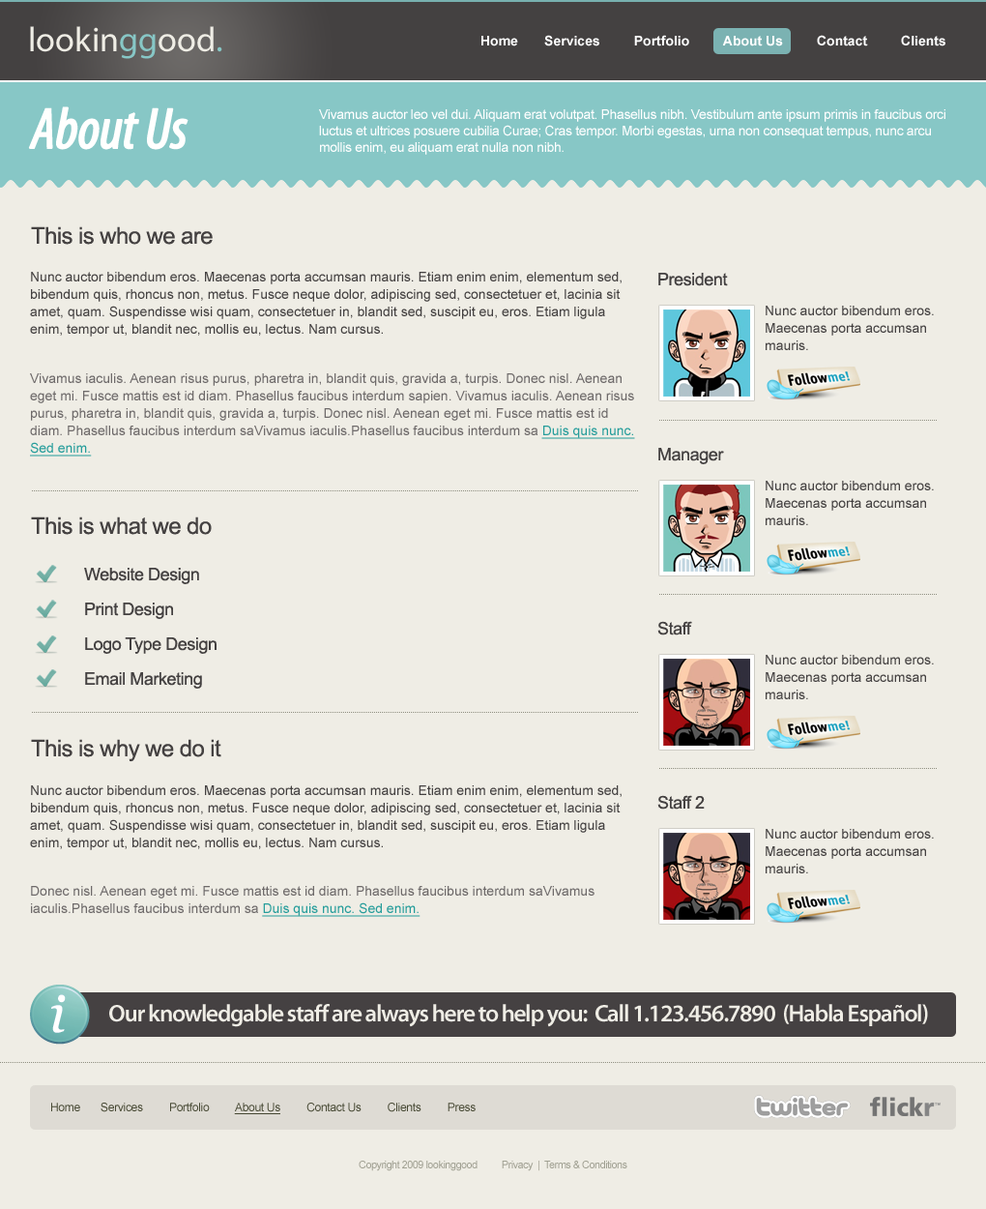
<style>
.page{position:relative;width:986px;height:1209px;background:#efede5}
.page>*{position:absolute;margin:0}
.t1{font:34.8px "MyriadPro-Regular";color:#efede5}
.t2{font:34.8px "MyriadPro-Regular";color:#87c7c6}
.t3{font:13.5px "Arial-BoldMT";color:#ffffff}
.t4{font:58px "MyriadPro-CondIt";letter-spacing:-0.025em;color:#fffffe;font-weight:bold}
.t5{font:13.5px "ArialMT";letter-spacing:-0.025em;color:#ffffff}
.t6{font:23.2px "ArialMT";letter-spacing:-0.025em;color:#444141}
.t7{font:13.5px/17.4px "ArialMT";color:#444141}
.t8{font:17.4px "ArialMT";letter-spacing:-0.025em;color:#444141}
.t9{font:13.5px/17.4px "ArialMT";color:#6e6a6a}
.t10{font:13.5px/17.4px "ArialMT";color:#269d9b;text-decoration:underline}
.t11{font:17.4px/34.8px "ArialMT";letter-spacing:-0.025em;color:#444141}
.t12{font:24.2px "MyriadPro-Semibold";letter-spacing:-0.05em;color:#efede5}
.t13{font:11.6px "ArialMT";letter-spacing:-0.025em;color:#464833}
.t14{font:11.6px "ArialMT";letter-spacing:-0.025em;color:#464833;text-decoration:underline}
.t15{font:10.6px "ArialMT";letter-spacing:-0.05em;color:#a1a193}
</style>
<div class="page">
<p class="t1" style="left:30px;top:26px;width:192px;height:33px">lookin<span class="t2">gg</span>ood<span class="t2">.</span></p>
<p class="t3" style="left:482px;top:35px;width:464px;height:11px">Home       Services         Portfolio         About Us         Contact         Clients</p>
<p class="t4" style="left:28px;top:106px;width:161px;height:44px">About Us</p>
<p class="t5" style="left:319px;top:109px;width:627px;height:46px">Vivamus auctor leo vel dui. Aliquam erat volutpat. Phasellus nibh. Vestibulum ante ipsum primis in faucibus orci luctus et ultrices posuere cubilia Curae; Cras tempor. Morbi egestas, urna non consequat tempus, nunc arcu mollis enim, eu aliquam erat nulla non nibh.</p>
<p class="t6" style="left:31px;top:226px;width:182px;height:19px">This is who we are</p>
<p class="t7" style="left:30px;top:272px;width:592px;height:65px">Nunc auctor bibendum eros. Maecenas porta accumsan mauris. Etiam enim enim, elementum sed, bibendum quis, rhoncus non, metus. Fusce neque dolor, adipiscing sed, consectetuer et, lacinia sit amet, quam. Suspendisse wisi quam, consectetuer in, blandit sed, suscipit eu, eros. Etiam ligula enim, tempor ut, blandit nec, mollis eu, lectus. Nam cursus.</p>
<p class="t8" style="left:659px;top:273px;width:69px;height:13px">President</p>
<p class="t7" style="left:766px;top:306px;width:168px;height:44px">Nunc auctor bibendum eros. Maecenas porta accumsan mauris.</p>
<p class="t9" style="left:30px;top:373px;width:605px;height:83px">Vivamus iaculis. Aenean risus purus, pharetra in, blandit quis, gravida a, turpis. Donec nisl. Aenean eget mi. Fusce mattis est id diam. Phasellus faucibus interdum sapien. Vivamus iaculis. Aenean risus purus, pharetra in, blandit quis, gravida a, turpis. Donec nisl. Aenean eget mi. Fusce mattis est id diam. Phasellus faucibus interdum saVivamus iaculis.Phasellus faucibus interdum sa <span class="t10">Duis quis nunc. Sed enim.</span></p>
<p class="t8" style="left:659px;top:448px;width:65px;height:16px">Manager</p>
<p class="t7" style="left:766px;top:481px;width:168px;height:44px">Nunc auctor bibendum eros. Maecenas porta accumsan mauris.</p>
<p class="t6" style="left:31px;top:516px;width:181px;height:19px">This is what we do</p>
<p class="t11" style="left:84px;top:568px;width:133px;height:121px">Website Design<br>Print Design<br>Logo Type Design<br>Email Marketing</p>
<p class="t8" style="left:658px;top:621px;width:34px;height:14px">Staff</p>
<p class="t7" style="left:766px;top:655px;width:168px;height:44px">Nunc auctor bibendum eros. Maecenas porta accumsan mauris.</p>
<p class="t6" style="left:31px;top:739px;width:190px;height:23px">This is why we do it</p>
<p class="t7" style="left:30px;top:785px;width:592px;height:65px">Nunc auctor bibendum eros. Maecenas porta accumsan mauris. Etiam enim enim, elementum sed, bibendum quis, rhoncus non, metus. Fusce neque dolor, adipiscing sed, consectetuer et, lacinia sit amet, quam. Suspendisse wisi quam, consectetuer in, blandit sed, suscipit eu, eros. Etiam ligula enim, tempor ut, blandit nec, mollis eu, lectus. Nam cursus.</p>
<p class="t8" style="left:658px;top:795px;width:47px;height:14px">Staff 2</p>
<p class="t7" style="left:766px;top:829px;width:168px;height:44px">Nunc auctor bibendum eros. Maecenas porta accumsan mauris.</p>
<p class="t9" style="left:31px;top:886px;width:564px;height:31px">Donec nisl. Aenean eget mi. Fusce mattis est id diam. Phasellus faucibus interdum saVivamus iaculis.Phasellus faucibus interdum sa <span class="t10">Duis quis nunc. Sed enim.</span></p>
<p class="t12" style="left:109px;top:1004px;width:819px;height:23px">Our knowledgable staff are always here to help you:  Call 1.123.456.7890  (Habla Español)</p>
<p class="t13" style="left:51px;top:1102px;width:425px;height:12px">Home       Services         Portfolio         <span class="t14">About Us</span>         Contact Us         Clients         Press</p>
<p class="t15" style="left:359px;top:1160px;width:269px;height:11px">Copyright 2009 lookinggood          Privacy  |  Terms &amp; Conditions</p>
</div>
